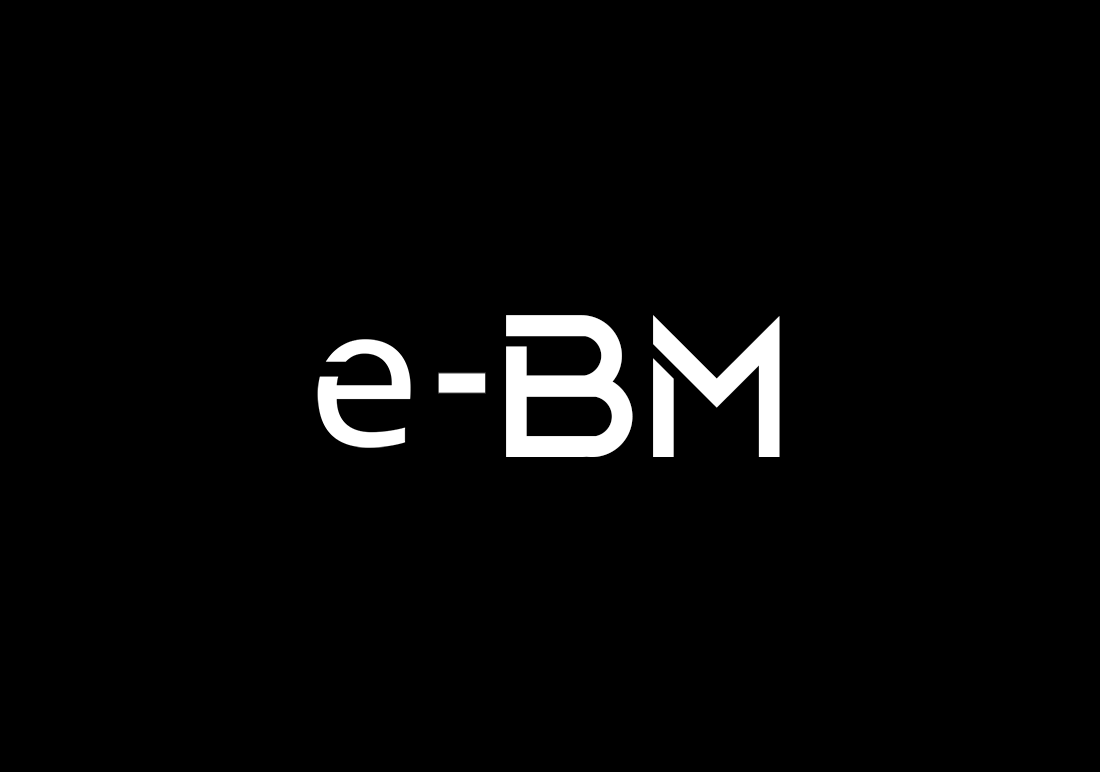
<style>
.page{position:relative;width:1100px;height:772px;background:#000000}
.page>*{position:absolute;margin:0}
.t1{font:212.7px "AquireRegular";color:#ffffff}
</style>
<div class="page">
<p class="t1" style="left:438px;top:315px;width:342px;height:142px">-BM</p>
</div>
